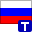
<style>
.page{position:relative;width:32px;height:32px;background:#ffffff}
.page>*{position:absolute;margin:0}
.t1{font:12px "HelveticaNeue-Bold";color:#ffffff}
</style>
<div class="page">
<p class="t1" style="left:21px;top:22px;width:8px;height:9px">T</p>
</div>
